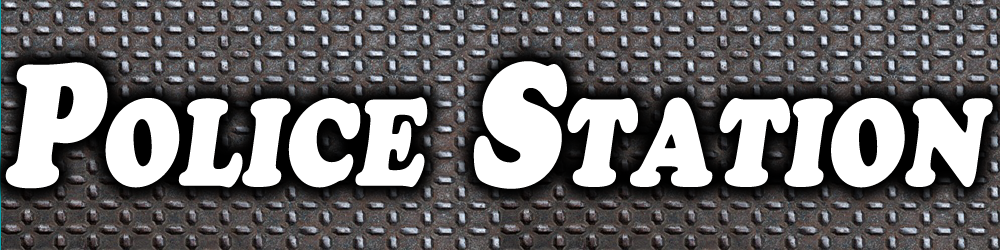
<style>
.page{position:relative;width:1000px;height:250px;background:#ffffff}
.page>*{position:absolute;margin:0}
.t1{font:168.2px "CooperBlackStd";color:#ffffff;font-variant:small-caps;font-weight:bold;font-style:italic;scale:0.78 1}
</style>
<div class="page">
<p class="t1" style="left:5px;top:61px;width:988px;height:128px">Police Station</p>
</div>
